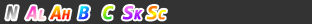
<style>
.page{position:relative;width:312px;height:24px;background:#333333}
.page>*{position:absolute;margin:0}
.t1{font:20px "Consolas-BoldItalic";font-weight:bold;scale:0.95 1}
.t2{font:20px "Consolas-BoldItalic";font-variant:small-caps;font-weight:bold;scale:0.95 1}
</style>
<div class="page">
<p class="t1" style="left:6px;top:6px;width:12px;height:14px">N</p>
<p class="t2" style="left:26px;top:6px;width:19px;height:14px">Al</p>
<p class="t2" style="left:50px;top:6px;width:21px;height:14px">Ah</p>
<p class="t1" style="left:78px;top:6px;width:11px;height:14px">B</p>
<p class="t1" style="left:103px;top:6px;width:11px;height:14px">C</p>
<p class="t2" style="left:122px;top:6px;width:21px;height:14px">Sk</p>
<p class="t2" style="left:146px;top:6px;width:20px;height:14px">Sc</p>
</div>
